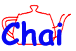
<style>
.page{position:relative;width:76px;height:51px;background:#ffffff}
.page>*{position:absolute;margin:0}
.t1{font:30.8px "ComicSansMS-Bold";color:#0808f2}
</style>
<div class="page">
<p class="t1" style="left:1px;top:21px;width:62px;height:25px">Chai</p>
</div>
